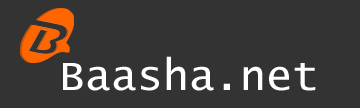
<style>
.page{position:relative;width:360px;height:108px;background:#333333}
.page>*{position:absolute;margin:0}
.t1{font:43px "LucidaConsole";color:#ffffff}
</style>
<div class="page">
<p class="t1" style="left:63px;top:56px;width:253px;height:35px">Baasha.net</p>
</div>
